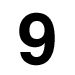
<style>
.page{position:relative;width:75px;height:75px;background:#ffffff}
.page>*{position:absolute;margin:0}
.t1{font:72px "Helvetica-Bold";color:#000000}
</style>
<div class="page">
<p class="t1" style="left:19px;top:12px;width:36px;height:54px">9</p>
</div>
